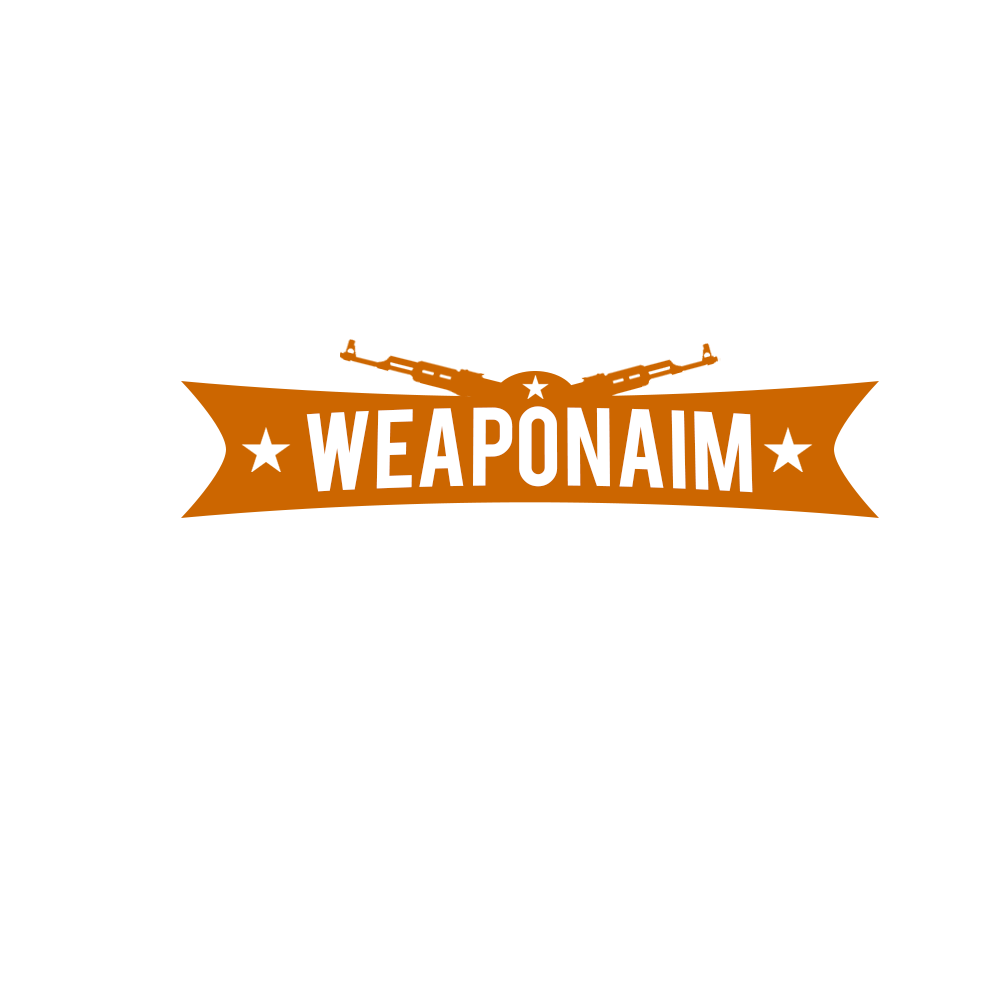
<style>
.page{position:relative;width:1000px;height:1000px;background:#ffffff}
.page>*{position:absolute;margin:0}
.t1{font:87.5px "Bebas";color:#ffffff}
</style>
<div class="page">
<p class="t1" style="left:306px;top:406px;width:447px;height:87px">WeaponAim</p>
</div>
